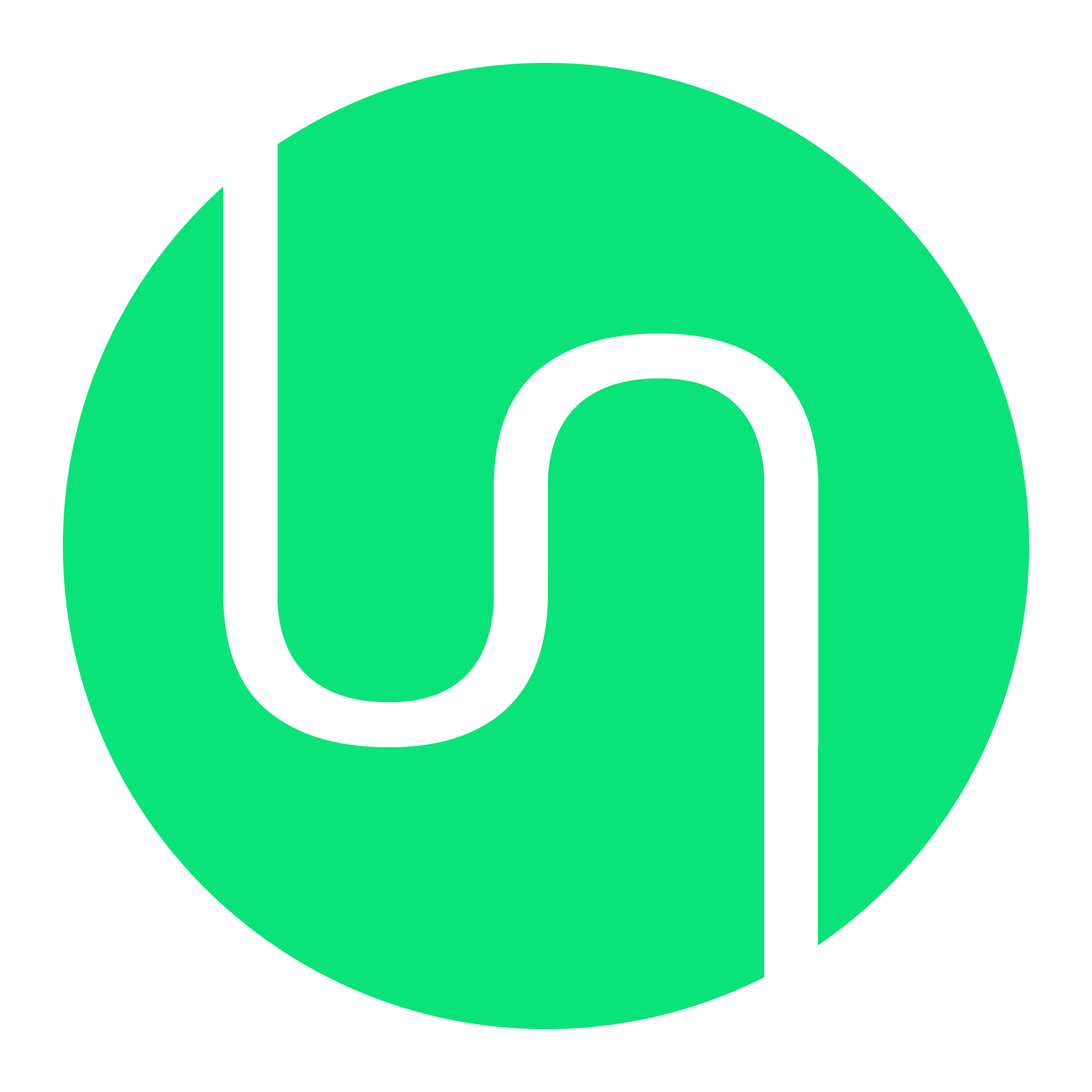
<style>
.page{position:relative;width:1092px;height:1092px;background:#0ae37a}
.page>*{position:absolute;margin:0}
.t1{font:565.1px "HelveticaNeue";color:#ffffff}
</style>
<div class="page">
<p class="t1" style="left:223px;top:334px;width:325px;height:413px">U</p>
</div>
